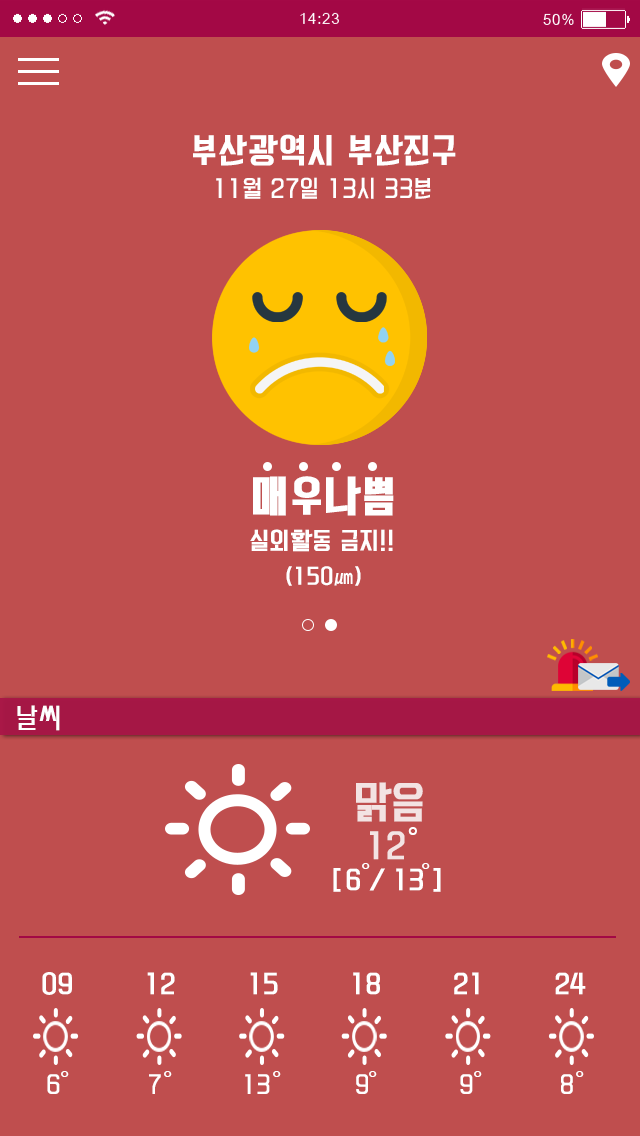
<style>
.page{position:relative;width:640px;height:1136px;background:#bf4e4e}
.page>*{position:absolute;margin:0}
.t1{font:32px "KoreanYNMYT-B";letter-spacing:0.025em;color:#ffffff}
.t2{font:22px "KoreanYNMYT-L";letter-spacing:0.025em;color:#ffffff}
.t3{font:40px "KoreanYNMYT-B";letter-spacing:0.025em;color:#ffffff;font-weight:bold}
.t4{font:22px "KoreanYNMYT-L";letter-spacing:0.025em;color:#ffffff;font-weight:bold}
.t5{font:20px "KoreanYNMYT-M";letter-spacing:0.025em;color:#ffffff}
.t6{font:28px "MoeumTR-HM";letter-spacing:0.025em;color:#ffffff}
.t7{font:40.4px "KoreanYNMYT-L";color:#f3e3e3;font-weight:bold}
.t8{font:31px "KoreanYNMYT-M";color:#f3e3e3}
.t9{font:32.1px "MoeumTR-HM";color:#ffffff}
.t10{font:24px "KoreanYNMYT-M";color:#ffffff}
.t11{font:28px "MoeumTR-HM";color:#ffffff}
.t12{font:22px "KoreanYNMYT-L";color:#ffffff}
</style>
<div class="page">
<p class="t1" style="left:193px;top:134px;width:263px;height:32px">부산광역시 부산진구</p>
<p class="t2" style="left:216px;top:177px;width:215px;height:22px">11월 27일 13시 33분</p>
<p class="t3" style="left:253px;top:476px;width:141px;height:40px">매우나쁨</p>
<p class="t4" style="left:250px;top:529px;width:143px;height:23px">실외활동 금지!!</p>
<p class="t5" style="left:286px;top:566px;width:75px;height:20px">(150㎛)</p>
<p class="t6" style="left:17px;top:705px;width:43px;height:26px">날씨</p>
<p class="t7" style="left:356px;top:782px;width:67px;height:40px">맑음</p>
<p class="t8" style="left:370px;top:831px;width:35px;height:29px">12</p>
<p class="t9" style="left:408px;top:827px;width:9px;height:8px">°</p>
<p class="t10" style="left:333px;top:868px;width:108px;height:24px">[ 6 / 13 ]</p>
<p class="t11" style="left:362px;top:863px;width:8px;height:6px">°</p>
<p class="t11" style="left:422px;top:863px;width:8px;height:6px">°</p>
<p class="t10" style="left:42px;top:972px;width:544px;height:23px">09          12         15          18         21          24</p>
<p class="t11" style="left:61px;top:1071px;width:8px;height:6px">°</p>
<p class="t11" style="left:164px;top:1071px;width:8px;height:6px">°</p>
<p class="t11" style="left:273px;top:1071px;width:8px;height:6px">°</p>
<p class="t11" style="left:369px;top:1071px;width:8px;height:6px">°</p>
<p class="t11" style="left:474px;top:1071px;width:8px;height:6px">°</p>
<p class="t11" style="left:576px;top:1071px;width:8px;height:6px">°</p>
<p class="t12" style="left:47px;top:1074px;width:526px;height:20px">6               7               13           9             9            8</p>
</div>
